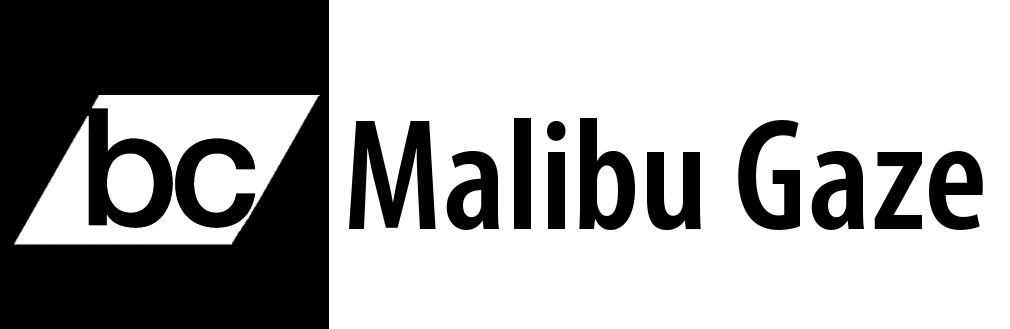
<style>
.page{position:relative;width:1010px;height:329px;background:#ffffff}
.page>*{position:absolute;margin:0}
.t1{font:160px "MyriadPro-SemiboldCond";color:#000000}
</style>
<div class="page">
<p class="t1" style="left:349px;top:118px;width:634px;height:112px">Malibu Gaze</p>
</div>
